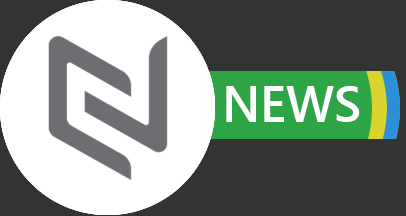
<style>
.page{position:relative;width:406px;height:216px;background:#333333}
.page>*{position:absolute;margin:0}
.t1{font:50px "YuGothicUI-Bold";color:#ffffff}
</style>
<div class="page">
<p class="t1" style="left:226px;top:86px;width:134px;height:36px">NEWS</p>
</div>
